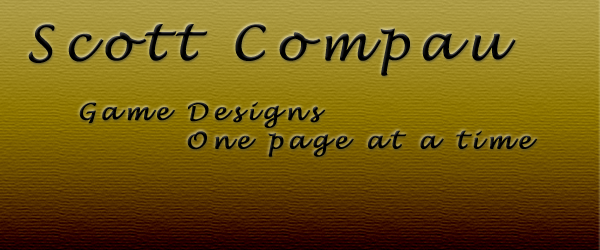
<style>
.page{position:relative;width:600px;height:250px}
.page>*{position:absolute;margin:0}
.t1{font:48px "LucidaHandwriting-Italic";letter-spacing:0.18em;color:#000000;font-weight:bold}
.t2{font:24px "LucidaHandwriting-Italic";letter-spacing:0.18em;color:#000000;font-weight:bold}
</style>
<div class="page">
<p class="t1" style="left:28px;top:24px;width:488px;height:52px">Scott Compau</p>
<p class="t2" style="left:79px;top:102px;width:459px;height:55px">Game Designs <br>   One page at a time</p>
</div>
